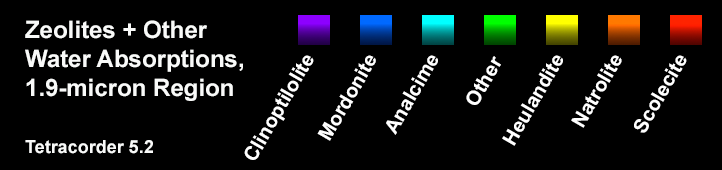
<style>
.page{position:relative;width:722px;height:170px;background:#000000}
.page>*{position:absolute;margin:0}
.t1{font:24px "Arial-BoldMT";color:#f9faf9}
.t2{font:18px "Arial-BoldMT";color:#f9faf9}
.t3{font:20px "Arial-BoldMT";color:#ffffff}
</style>
<div class="page">
<p class="t1" style="left:25px;top:20px;width:218px;height:134px">Zeolites + Other<br>Water Absorptions,<br>1.9-micron Region<br><br><br><br><span class="t2">Tetracorder 5.2</span></p>
<p class="t3" style="left:244px;top:55px;width:70px;height:105px;rotate:-60deg">Clinoptilolite</p>
<p class="t3" style="left:317px;top:55px;width:59px;height:86px;rotate:-60deg">Mordonite</p>
<p class="t3" style="left:386px;top:55px;width:52px;height:80px;rotate:-60deg">Analcime</p>
<p class="t3" style="left:466px;top:56px;width:35px;height:49px;rotate:-60deg">Other</p>
<p class="t3" style="left:502px;top:55px;width:61px;height:91px;rotate:-60deg">Heulandite</p>
<p class="t3" style="left:571px;top:55px;width:51px;height:73px;rotate:-60deg">Natrolite</p>
<p class="t3" style="left:634px;top:55px;width:53px;height:78px;rotate:-60deg">Scolecite</p>
</div>
